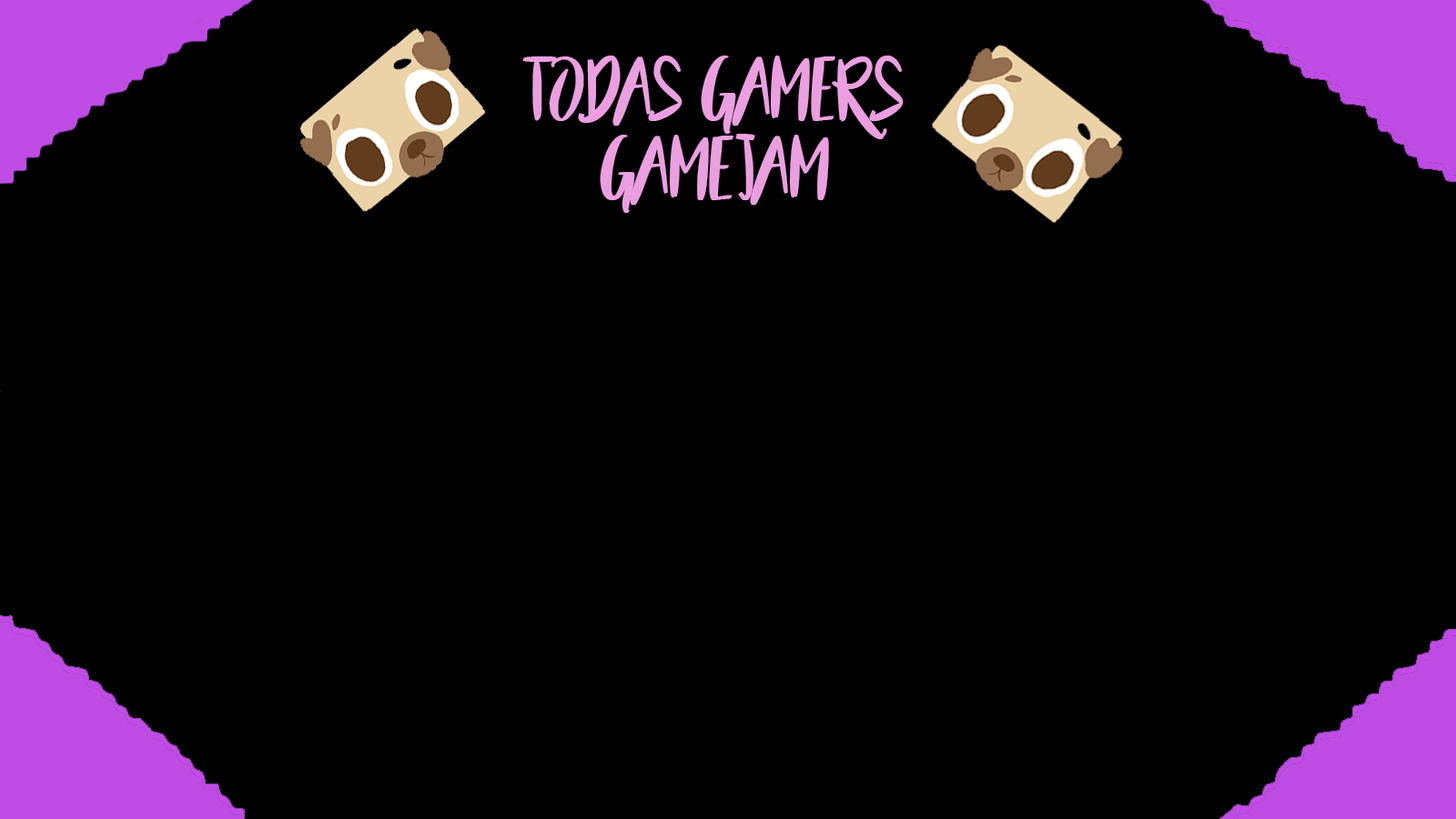
<style>
.page{position:relative;width:1456px;height:819px;background:#000000}
.page>*{position:absolute;margin:0}
.t1{font:65.5px "BeautyandtheBeast";color:#eb9fe1}
</style>
<div class="page">
<p class="t1" style="left:522px;top:56px;width:382px;height:157px;text-align:center">todas gamers<br>gamejam</p>
</div>
